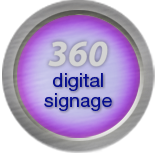
<style>
.page{position:relative;width:156px;height:153px;background:#ffffff}
.page>*{position:absolute;margin:0}
.t1{font:19.4px/20.8px "HelveticaNeueLTPro-Roman";color:#050c8f}
</style>
<div class="page">
<p class="t1" style="left:44px;top:73px;width:68px;height:38px;text-align:center">digital<br>signage</p>
</div>
